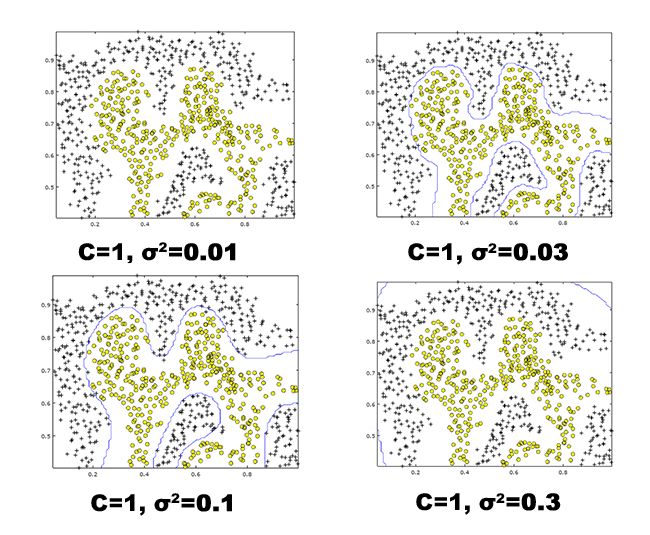
<style>
.page{position:relative;width:650px;height:535px;background:#ffffff}
.page>*{position:absolute;margin:0}
.t1{font:22.9px "Arial-Black";color:#000000}
.t2{font:22.9px "Arial-Black";color:#000000;font-weight:bold}
</style>
<div class="page">
<p class="t1" style="left:78px;top:242px;width:158px;height:23px">C=1, σ2<span class="t2">=0.01</span></p>
<p class="t1" style="left:408px;top:243px;width:160px;height:22px">C=1, σ2<span class="t2">=0.03</span></p>
<p class="t1" style="left:91px;top:493px;width:141px;height:23px">C=1, σ2<span class="t2">=0.1</span></p>
<p class="t1" style="left:416px;top:493px;width:145px;height:22px">C=1, σ2<span class="t2">=0.3</span></p>
</div>
